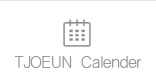
<style>
.page{position:relative;width:156px;height:80px;background:#ffffff}
.page>*{position:absolute;margin:0}
.t1{font:16px "Haansoft-Dotum";letter-spacing:-0.05em;color:#999999}
</style>
<div class="page">
<p class="t1" style="left:14px;top:56px;width:128px;height:12px">TJOEUN  Calender</p>
</div>
